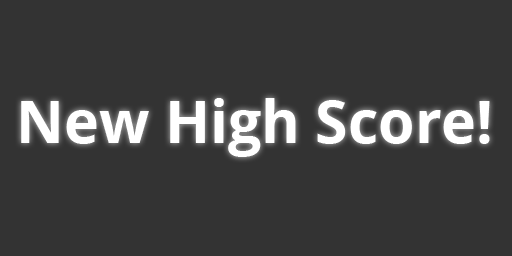
<style>
.page{position:relative;width:512px;height:256px;background:#333333}
.page>*{position:absolute;margin:0}
.t1{font:59px "OpenSans-Bold";color:#ffffff}
</style>
<div class="page">
<p class="t1" style="left:21px;top:98px;width:469px;height:59px">New High Score!</p>
</div>
